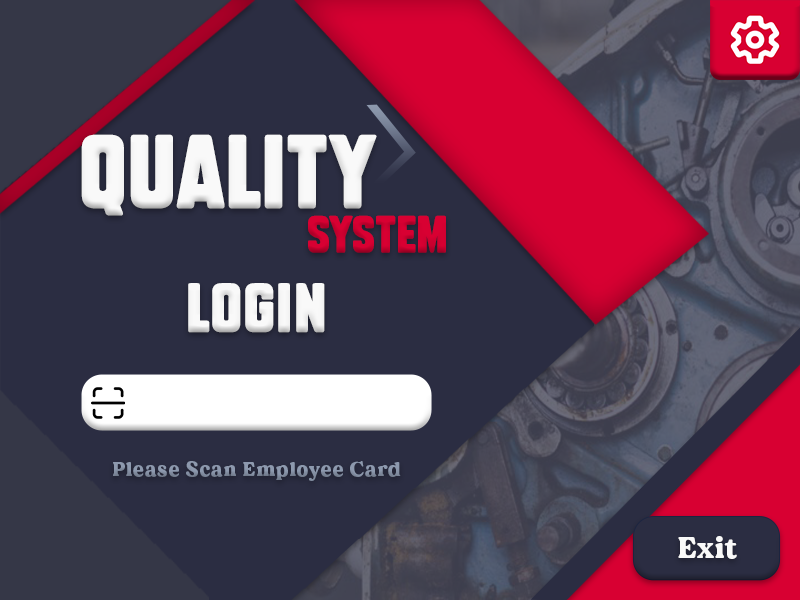
<style>
.page{position:relative;width:800px;height:600px;background:#2b2d42}
.page>*{position:absolute;margin:0}
.t1{font:72px "SubtleCurves";letter-spacing:0.025em;color:#f9f9f9}
.t2{font:36px "SubtleCurves";letter-spacing:0.025em;color:#d80032}
.t3{font:48px "SubtleCurves";letter-spacing:0.025em;color:#f9f9f9}
.t4{font:20px "MADEDillan";letter-spacing:0.05em;color:#8d99ae}
.t5{font:30px "MADEDillan";letter-spacing:0.025em;color:#f9f9f9}
</style>
<div class="page">
<p class="t1" style="left:81px;top:134px;width:296px;height:82px">QUALITY</p>
<p class="t2" style="left:308px;top:215px;width:138px;height:38px">System</p>
<p class="t3" style="left:188px;top:283px;width:137px;height:50px">Login</p>
<p class="t4" style="left:113px;top:461px;width:288px;height:20px">Please Scan Employee Card</p>
<p class="t5" style="left:678px;top:536px;width:59px;height:23px">Exit</p>
</div>
